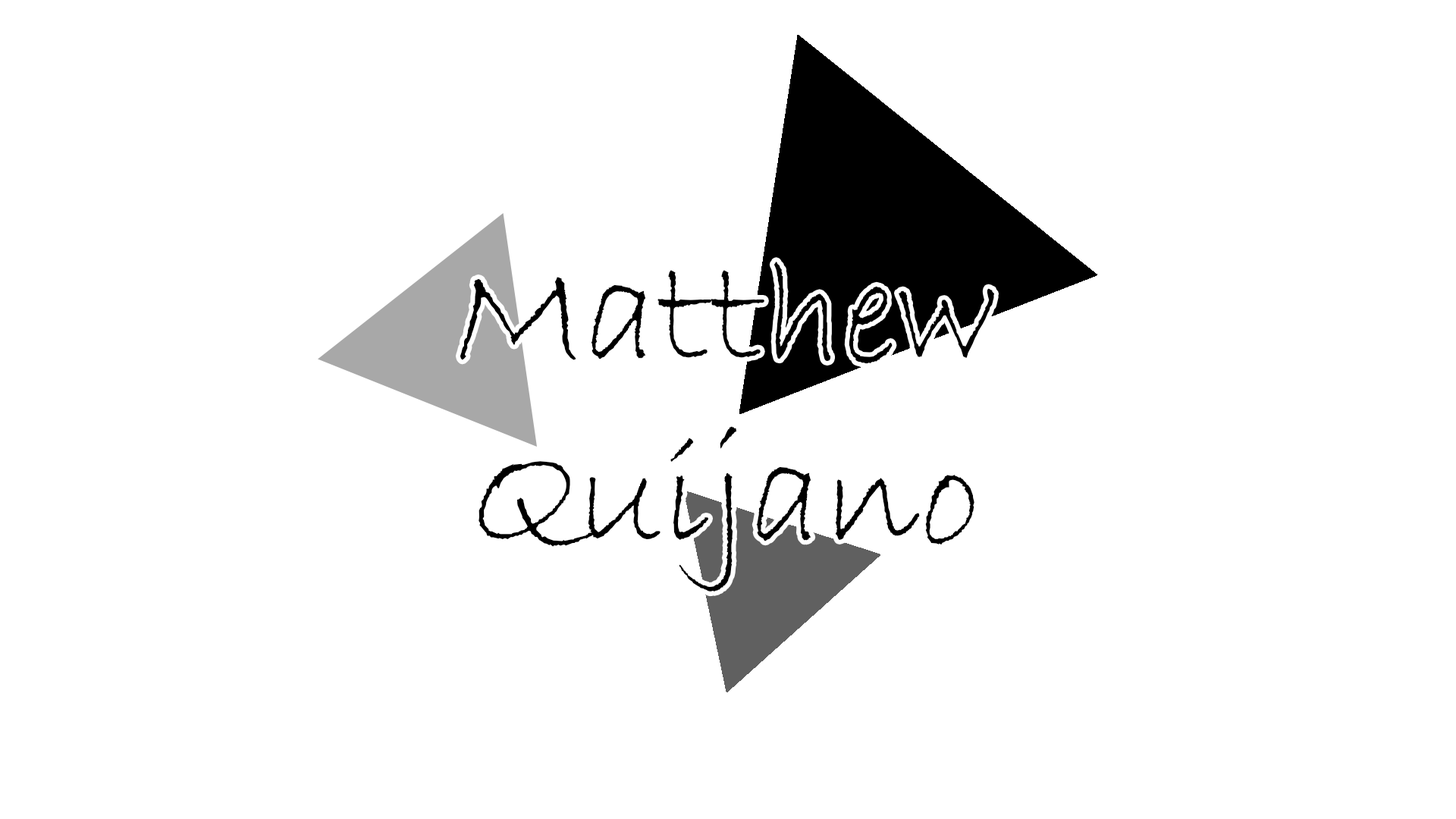
<style>
.page{position:relative;width:1456px;height:819px;background:#ffffff}
.page>*{position:absolute;margin:0}
.t1{font:151.7px "BradleyHandITC";color:#000000}
</style>
<div class="page">
<p class="t1" style="left:460px;top:262px;width:535px;height:330px;text-align:center">Matthew<br>Quijano</p>
</div>
